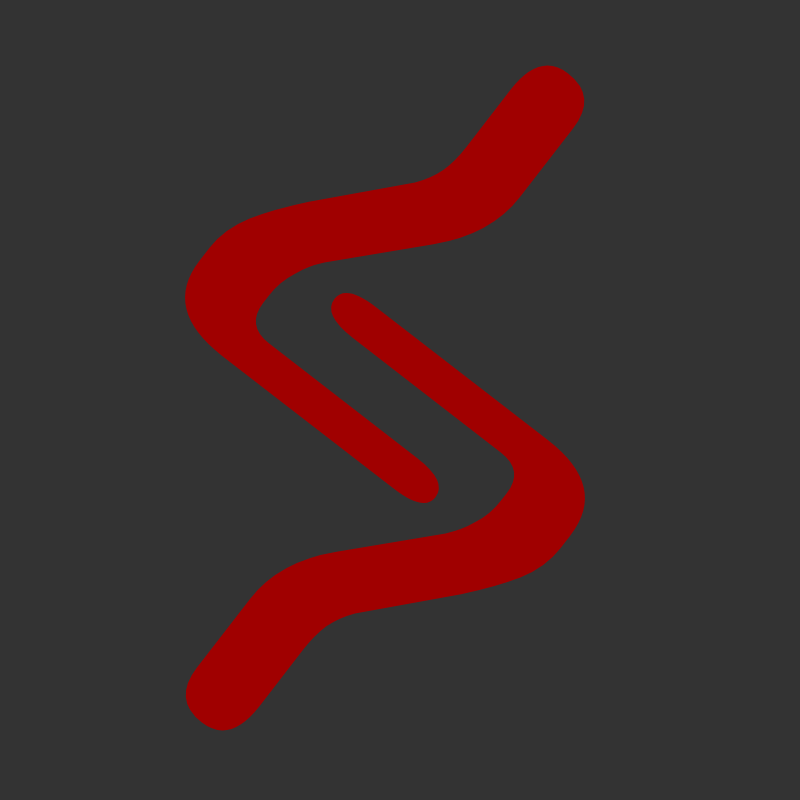
<style>
.page{position:relative;width:800px;height:800px;background:#333333}
.page>*{position:absolute;margin:0}
.t1{font:988.8px "CuteFont-Regular";color:#a00000}
</style>
<div class="page">
<p class="t1" style="left:185px;top:65px;width:400px;height:438px;rotate:-142deg">7</p>
<p class="t1" style="left:185px;top:293px;width:400px;height:438px;rotate:38deg">7</p>
</div>
